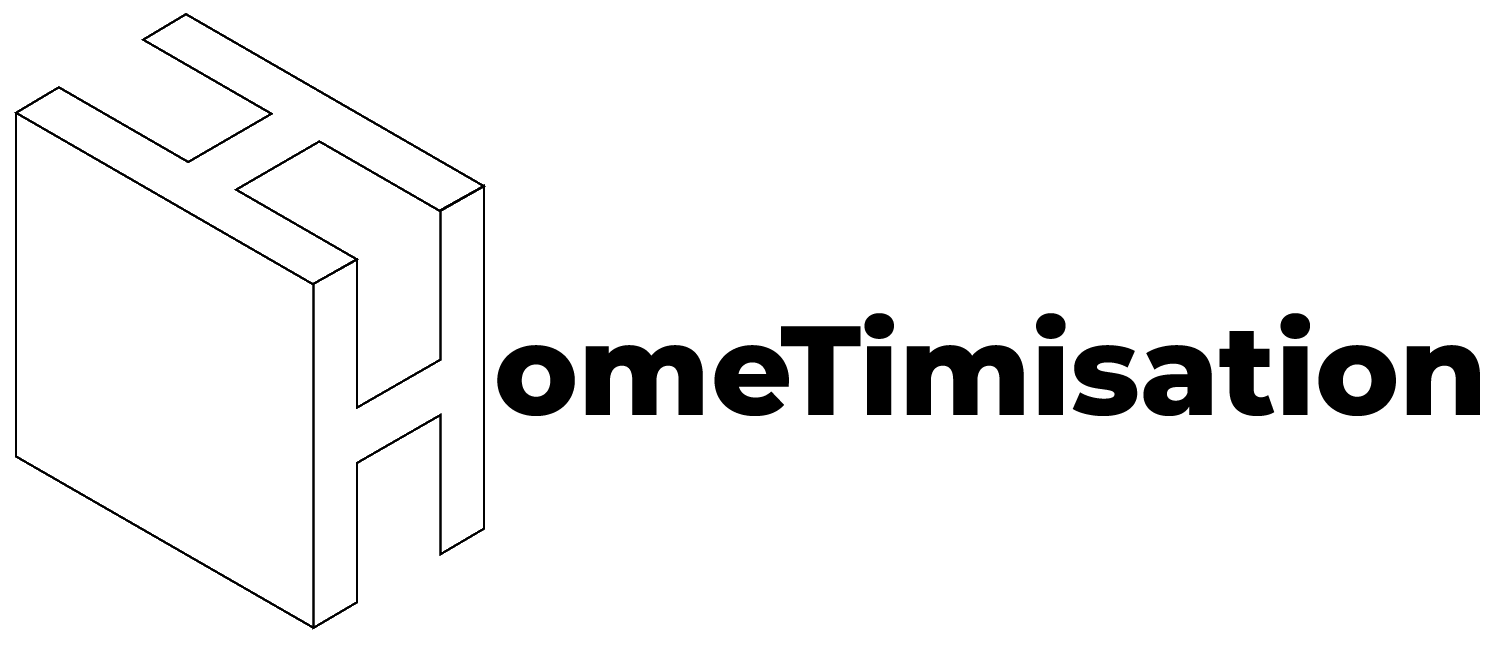
<style>
.page{position:relative;width:1500px;height:651px;background:#ffffff}
.page>*{position:absolute;margin:0}
.t1{font:126.3px "Montserrat-ExtraBold";color:#000000}
</style>
<div class="page">
<p class="t1" style="left:497px;top:313px;width:983px;height:103px">omeTimisation</p>
</div>
